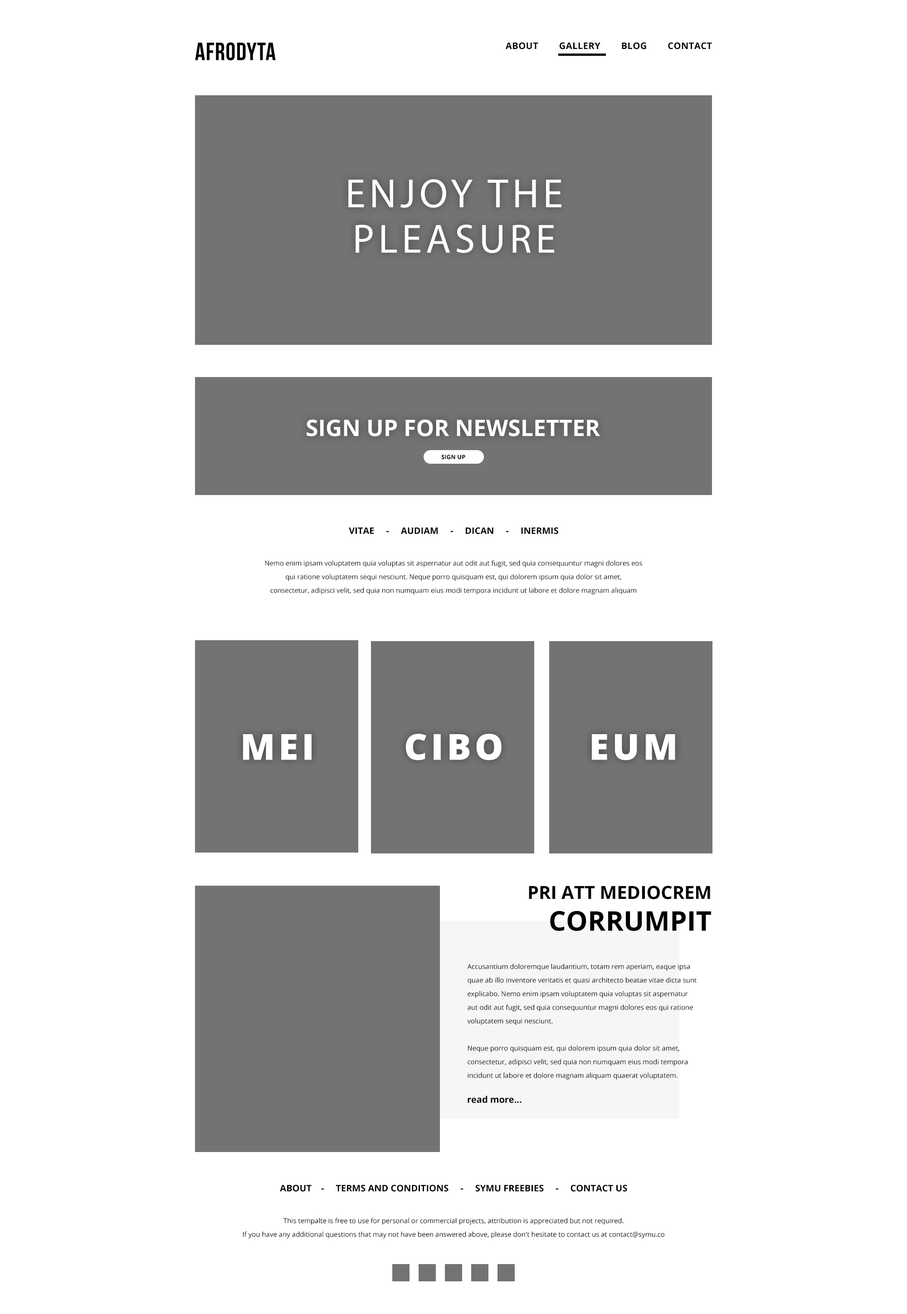
<style>
.page{position:relative;width:907px;height:1314px;background:#ffffff}
.page>*{position:absolute;margin:0}
.t1{font:9.1px "OpenSans-Bold";letter-spacing:0.025em;color:#000000;text-transform:uppercase}
.t2{font:40.8px/45.4px "MyriadPro-Regular";letter-spacing:0.1em;color:#ffffff}
.t3{font:22.7px "OpenSans-Bold";color:#ffffff}
.t4{font:5.9px "OpenSans-Bold";color:#000000}
.t5{font:9.1px "OpenSans-Bold";color:#000000;text-transform:uppercase}
.t6{font:6.8px/13.6px "OpenSans";color:#000000}
.t7{font:35.9px "OpenSans-Extrabold";letter-spacing:0.1em;color:#ffffff;text-transform:uppercase}
.t8{font:18.1px/31.8px "OpenSans-Bold";color:#000000;text-transform:uppercase}
.t9{font:27.2px/31.8px "OpenSans-Bold";color:#000000;text-transform:uppercase}
.t10{font:9.1px "OpenSans-Bold";color:#000000}
</style>
<div class="page">
<p class="t1" style="left:506px;top:42px;width:206px;height:7px">About        GALLERY        BLOG        CONTACT</p>
<p class="t2" style="left:348px;top:179px;width:214px;height:74px;text-align:center">ENJOY THE<br>PLEASURE</p>
<p class="t3" style="left:307px;top:419px;width:293px;height:17px">SIGN UP FOR NEWSLETTER</p>
<p class="t4" style="left:441px;top:455px;width:25px;height:4px">SIGN UP</p>
<p class="t5" style="left:349px;top:527px;width:210px;height:7px">vitae     -     audiam     -     dican     -     inermis</p>
<p class="t6" style="left:265px;top:560px;width:377px;height:34px;text-align:center">Nemo enim ipsam voluptatem quia voluptas sit aspernatur aut odit aut fugit, sed quia consequuntur magni dolores eos qui ratione voluptatem sequi nesciunt. Neque porro quisquam est, qui dolorem ipsum quia dolor sit amet,<br>consectetur, adipisci velit, sed quia non numquam eius modi tempora incidunt ut labore et dolore magnam aliquam quaerat voluptatem.</p>
<p class="t7" style="left:243px;top:734px;width:69px;height:26px">mei</p>
<p class="t7" style="left:406px;top:734px;width:96px;height:26px">cibo</p>
<p class="t7" style="left:592px;top:734px;width:84px;height:26px">eum</p>
<p class="t8" style="left:529px;top:886px;width:182px;height:45px;text-align:right">Pri att mediocrem<br><span class="t9"> corrumpit</span></p>
<p class="t6" style="left:467px;top:964px;width:230px;height:115px">Accusantium doloremque laudantium, totam rem aperiam, eaque ipsa quae ab illo inventore veritatis et quasi architecto beatae vitae dicta sunt explicabo. Nemo enim ipsam voluptatem quia voluptas sit aspernatur aut odit aut fugit, sed quia consequuntur magni dolores eos qui ratione voluptatem sequi nesciunt. <br><br>Neque porro quisquam est, qui dolorem ipsum quia dolor sit amet, consectetur, adipisci velit, sed quia non numquam eius modi tempora incidunt ut labore et dolore magnam aliquam quaerat voluptatem.</p>
<p class="t10" style="left:468px;top:1096px;width:54px;height:7px">read more...</p>
<p class="t5" style="left:280px;top:1185px;width:348px;height:7px">ABOUT    -     TERMS AND CONDITioNS     -     SYMU FREEBIES     -     CONTACT US</p>
<p class="t6" style="left:243px;top:1218px;width:422px;height:21px;text-align:center">This tempalte is free to use for personal or commercial projects, attribution is appreciated but not required.<br>If you have any additional questions that may not have been answered above, please don't hesitate to contact us at contact@symu.co</p>
</div>
